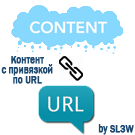
<style>
.page{position:relative;width:135px;height:135px;background:#ffffff}
.page>*{position:absolute;margin:0}
.t1{font:10.8px/10px "FranklinGothic-Medium";color:#1d4971;font-weight:bold;scale:0.83 1}
.t2{font:10.8px "FranklinGothic-Medium";color:#1d4971;font-weight:bold;scale:0.83 1}
</style>
<div class="page">
<p class="t1" style="left:1px;top:56px;width:52px;height:28px;text-align:center">Контент<br>с привязкой<br>по URL</p>
<p class="t2" style="left:98px;top:124px;width:36px;height:11px">by SL3W</p>
</div>
